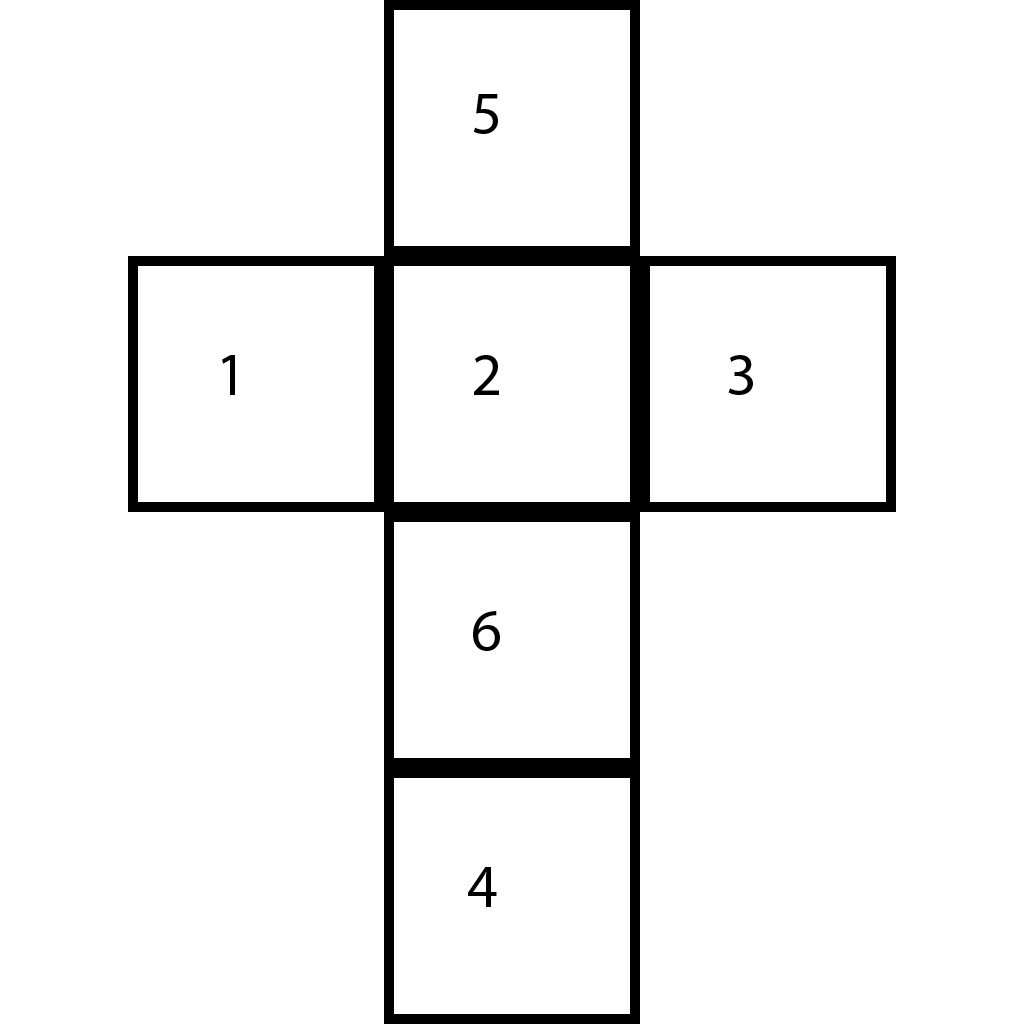
<style>
.page{position:relative;width:1024px;height:1024px;background:#ffffff}
.page>*{position:absolute;margin:0}
.t1{font:60px "MyriadPro-Regular";color:#000000}
</style>
<div class="page">
<p class="t1" style="left:473px;top:94px;width:25px;height:40px">5</p>
<p class="t1" style="left:222px;top:355px;width:13px;height:40px">1</p>
<p class="t1" style="left:474px;top:355px;width:25px;height:40px">2</p>
<p class="t1" style="left:728px;top:355px;width:25px;height:40px">3</p>
<p class="t1" style="left:473px;top:611px;width:27px;height:40px">6</p>
<p class="t1" style="left:468px;top:867px;width:29px;height:40px">4</p>
</div>
